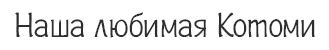
<style>
.page{position:relative;width:329px;height:50px;background:#ffffff}
.page>*{position:absolute;margin:0}
.t1{font:35px "Plainot";color:#2e2e2e}
</style>
<div class="page">
<p class="t1" style="left:15px;top:12px;width:300px;height:26px">Наша любимая Котоми</p>
</div>
